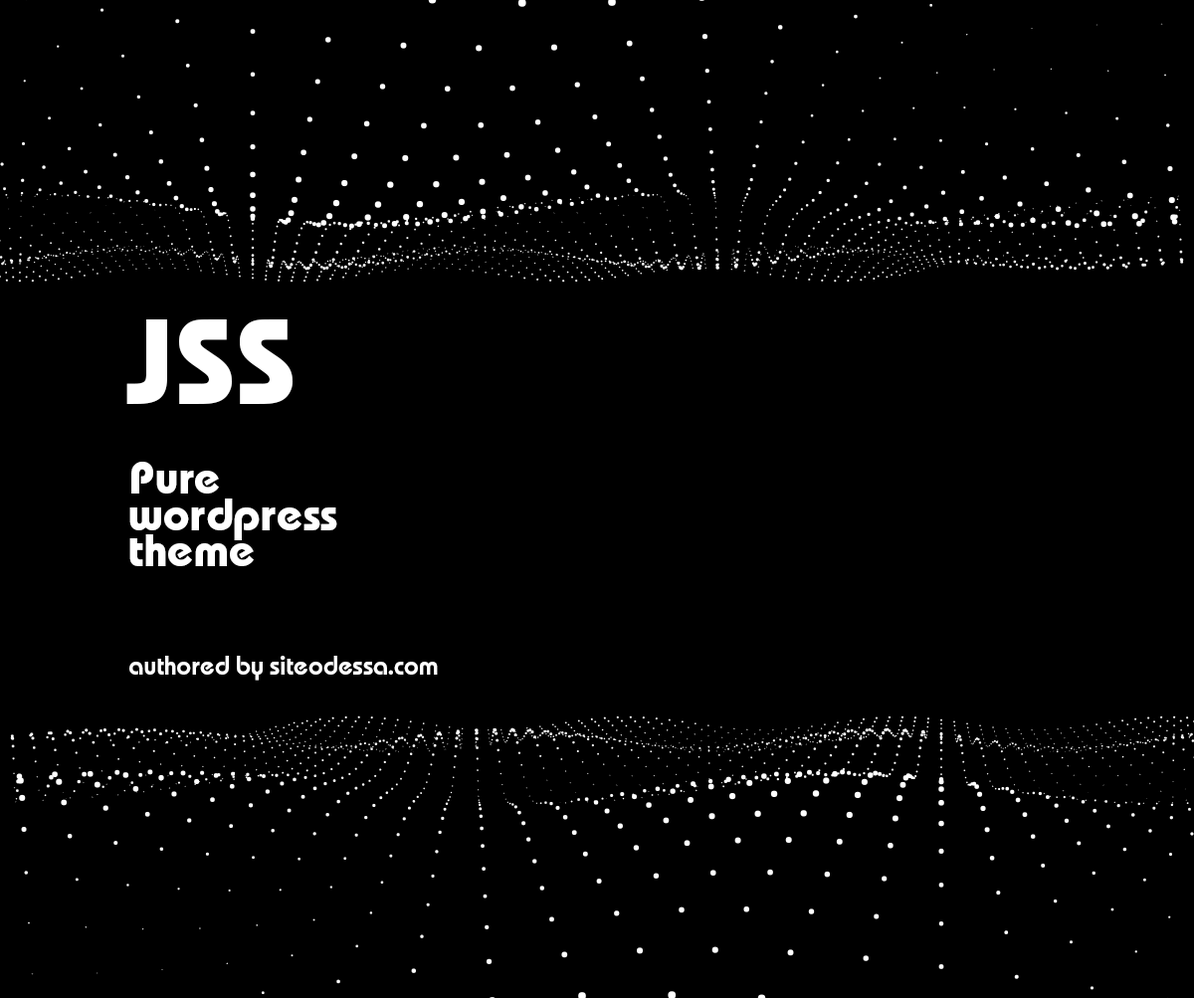
<style>
.page{position:relative;width:1194px;height:998px;background:#000000}
.page>*{position:absolute;margin:0}
.t1{font:25.8px/36.2px "BauhausC-Demibold";color:#ffffff}
.t2{font:120.5px "BauhausC-Bold";color:#ffffff}
.t3{font:45.2px/36.2px "BauhausC-Bold";color:#ffffff}
</style>
<div class="page">
<p class="t1" style="left:126px;top:320px;width:312px;height:361px;text-align:right"><span class="t2">JSS<br><br><br><br></span><span class="t3">Pure <br>wordpress<br>theme<br><br><br></span>authored by siteodessa.com</p>
</div>
